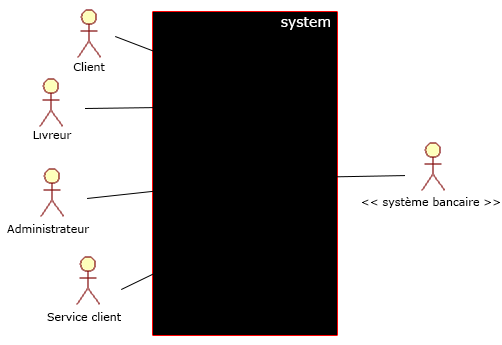
<style>
.page{position:relative;width:502px;height:345px;background:#ffffff}
.page>*{position:absolute;margin:0}
.t1{font:14px "Verdana";color:#ffffff}
.t2{font:11px "Verdana";color:#000000}
</style>
<div class="page">
<p class="t1" style="left:281px;top:17px;width:49px;height:13px">system</p>
<p class="t2" style="left:73px;top:62px;width:32px;height:9px">Client</p>
<p class="t2" style="left:33px;top:130px;width:39px;height:9px">Livreur</p>
<p class="t2" style="left:362px;top:197px;width:138px;height:11px">&lt;&lt; système bancaire &gt;&gt;</p>
<p class="t2" style="left:7px;top:224px;width:83px;height:9px">Administrateur</p>
<p class="t2" style="left:47px;top:312px;width:74px;height:9px">Service client</p>
</div>
